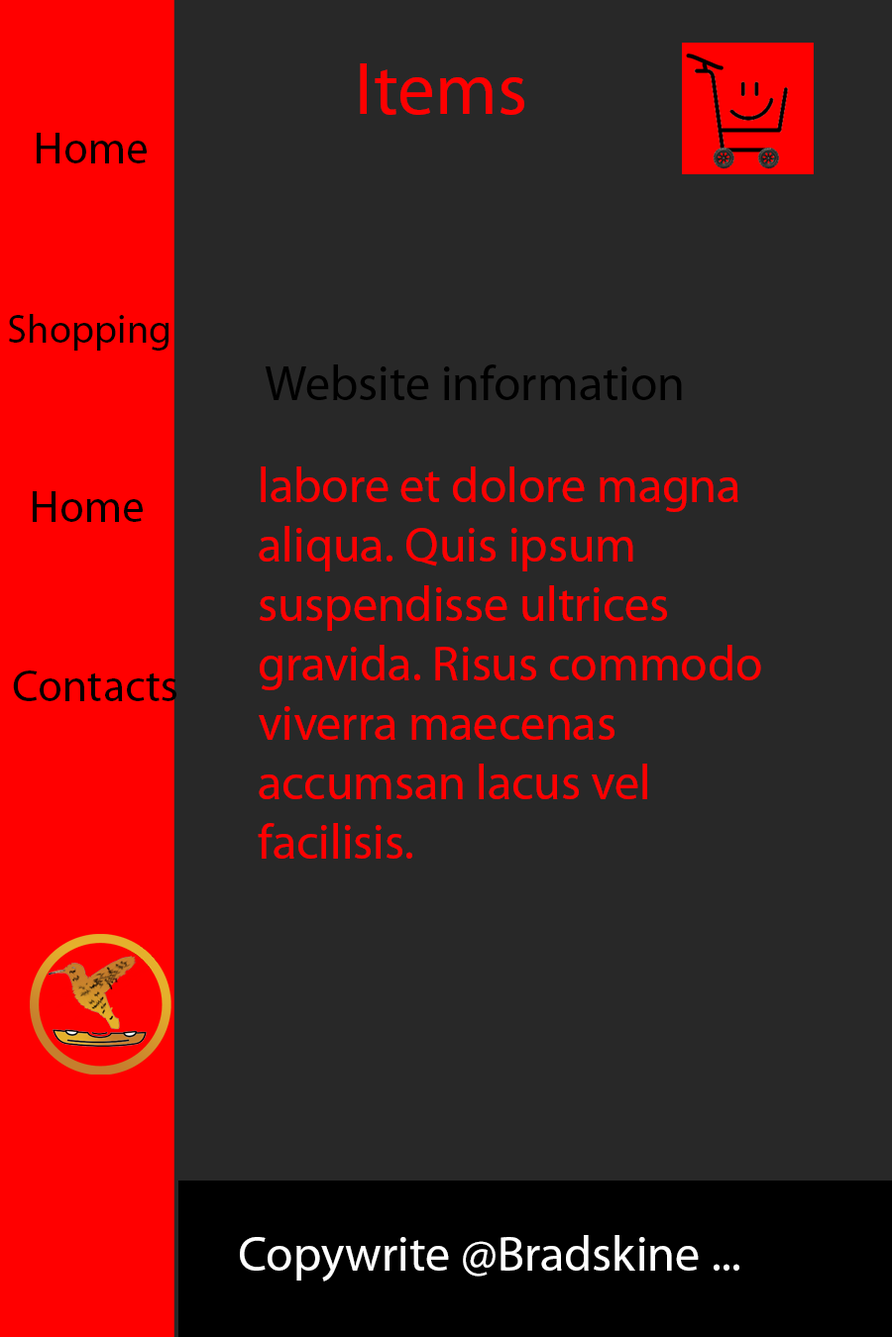
<style>
.page{position:relative;width:892px;height:1337px;background:#282828}
.page>*{position:absolute;margin:0}
.t1{font:74.3px "MyriadPro-Regular";color:#ff0000}
.t2{font:45.4px "MyriadPro-Regular";color:#000000}
.t3{font:40.3px "MyriadPro-Regular";color:#000000}
.t4{font:49.5px "MyriadPro-Regular";color:#000000}
.t5{font:49.5px "MyriadPro-Regular";color:#ff0000}
.t6{font:49.5px "MyriadPro-Regular";color:#ffffff}
</style>
<div class="page">
<p class="t1" style="left:360px;top:63px;width:164px;height:52px">Items</p>
<p class="t2" style="left:37px;top:133px;width:110px;height:30px">Home</p>
<p class="t3" style="left:9px;top:314px;width:160px;height:37px">Shopping</p>
<p class="t4" style="left:265px;top:365px;width:417px;height:35px">Website information</p>
<p class="t5" style="left:258px;top:467px;width:503px;height:392px">labore et dolore magna aliqua. Quis ipsum suspendisse ultrices gravida. Risus commodo viverra maecenas accumsan lacus vel facilisis.</p>
<p class="t2" style="left:33px;top:491px;width:110px;height:31px">Home</p>
<p class="t2" style="left:13px;top:671px;width:163px;height:30px">Contacts</p>
<p class="t6" style="left:240px;top:1235px;width:499px;height:47px">Copywrite @Bradskine ...</p>
</div>
